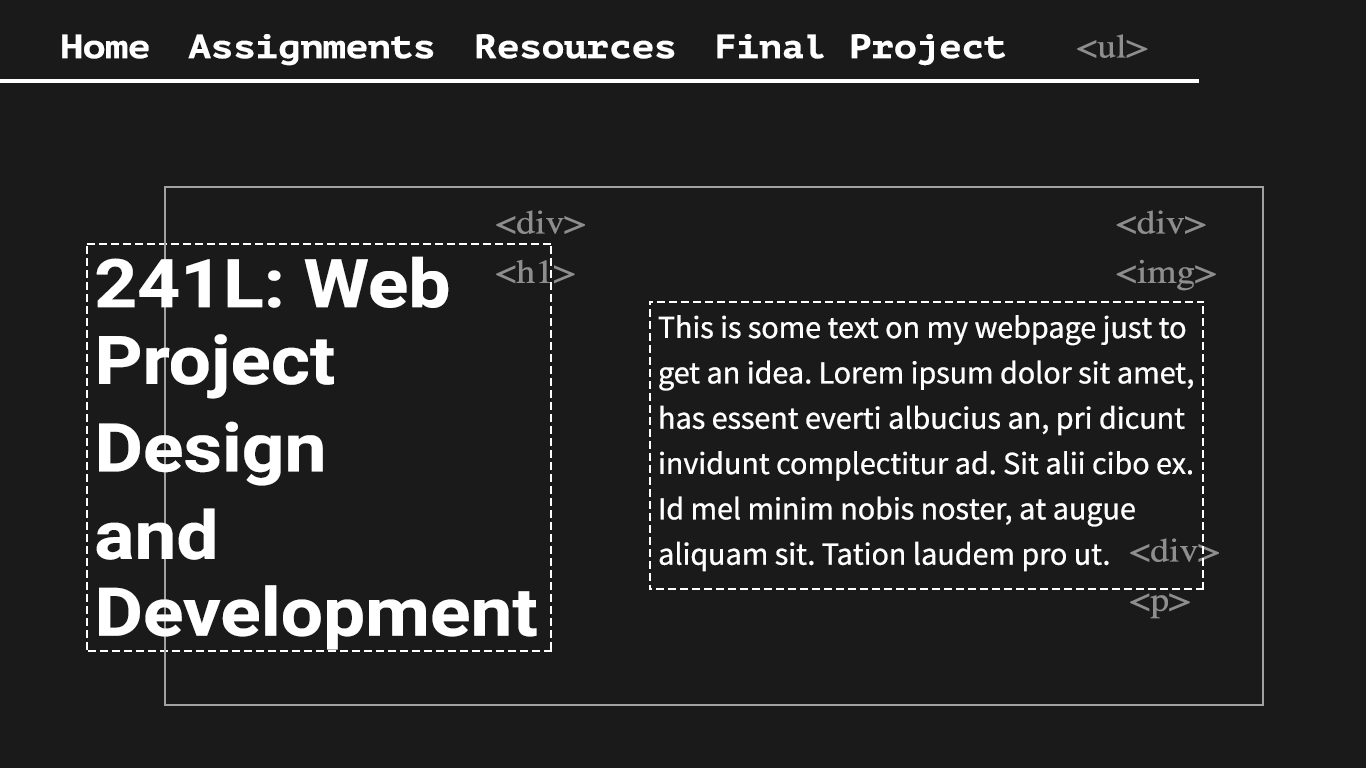
<style>
.page{position:relative;width:1366px;height:768px;background:#1a1a1a}
.page>*{position:absolute;margin:0}
.t1{font:33.6px "PTMono-Bold";color:#ffffff;scale:1.11 1}
.t2{font:33.6px "Times-Roman";color:#8e8e8e;scale:1.11 1}
.t3{font:33.6px/38.7px "Times-Roman";color:#8e8e8e;scale:1.11 1}
.t4{font:67.2px "Roboto-Bold";color:#ffffff;scale:1.11 1}
.t5{font:32px/45.3px "SourceSansPro-Regular";color:#ffffff}
</style>
<div class="page">
<p class="t1" style="left:62px;top:34px;width:87px;height:25px">Home</p>
<p class="t1" style="left:188px;top:34px;width:246px;height:32px">Assignments</p>
<p class="t1" style="left:476px;top:34px;width:199px;height:25px">Resources</p>
<p class="t1" style="left:717px;top:34px;width:289px;height:32px">Final Project</p>
<p class="t2" style="left:1077px;top:34px;width:71px;height:24px">&lt;ul&gt;</p>
<p class="t3" style="left:496px;top:210px;width:89px;height:74px">&lt;div&gt;<br>&lt;h1&gt;</p>
<p class="t3" style="left:1116px;top:210px;width:100px;height:81px">&lt;div&gt;<br>&lt;img&gt;</p>
<p class="t4" style="left:96px;top:256px;width:441px;height:394px">241L: Web Project <br>Design <br>and Development</p>
<p class="t5" style="left:658px;top:315px;width:535px;height:257px">This is some text on my webpage just to get an idea. Lorem ipsum dolor sit amet, has essent everti albucius an, pri dicunt invidunt complectitur ad. Sit alii cibo ex. Id mel minim nobis noster, at augue aliquam sit. Tation laudem pro ut.</p>
<p class="t3" style="left:1130px;top:538px;width:89px;height:81px">&lt;div&gt;<br>&lt;p&gt;</p>
</div>
